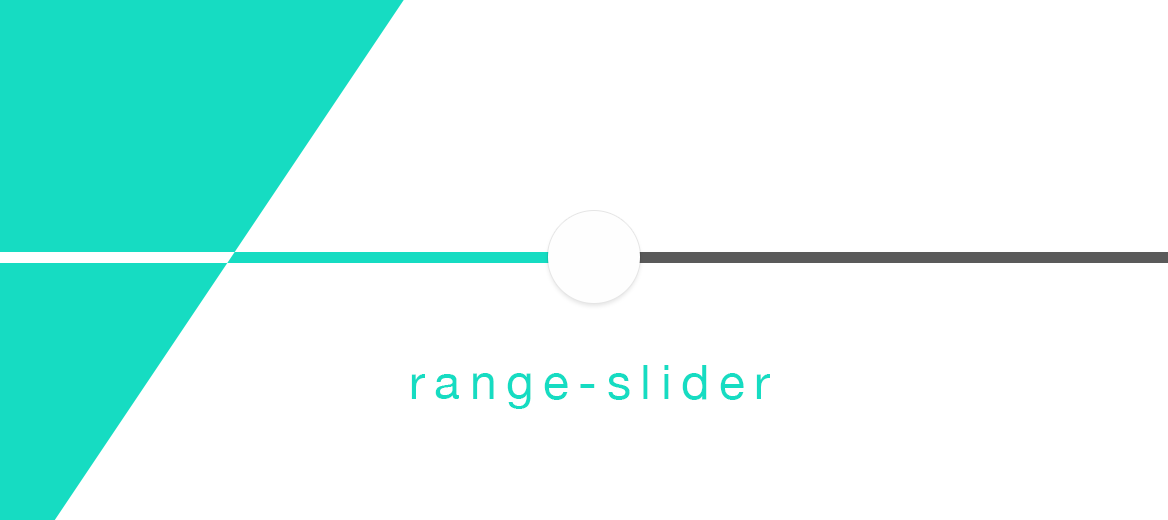
<style>
.page{position:relative;width:1168px;height:520px;background:#ffffff}
.page>*{position:absolute;margin:0}
.t1{font:48px "HelveticaNeue";letter-spacing:0.2em;color:#16dcc2}
</style>
<div class="page">
<p class="t1" style="left:411px;top:365px;width:359px;height:44px">range-slider</p>
</div>
